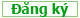
<style>
.page{position:relative;width:80px;height:18px;background:#ffffff}
.page>*{position:absolute;margin:0}
.t1{font:13.9px "Tahoma-Bold";color:#079d18}
</style>
<div class="page">
<p class="t1" style="left:11px;top:2px;width:58px;height:15px">Đăng ký</p>
</div>
